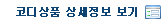
<style>
.page{position:relative;width:164px;height:22px;background:#ffffff}
.page>*{position:absolute;margin:0}
.t1{font:11px "Dotum";letter-spacing:-0.05em;color:#0e4474;font-weight:bold}
</style>
<div class="page">
<p class="t1" style="left:16px;top:7px;width:121px;height:10px">코디상품 상세정보 보기</p>
</div>
